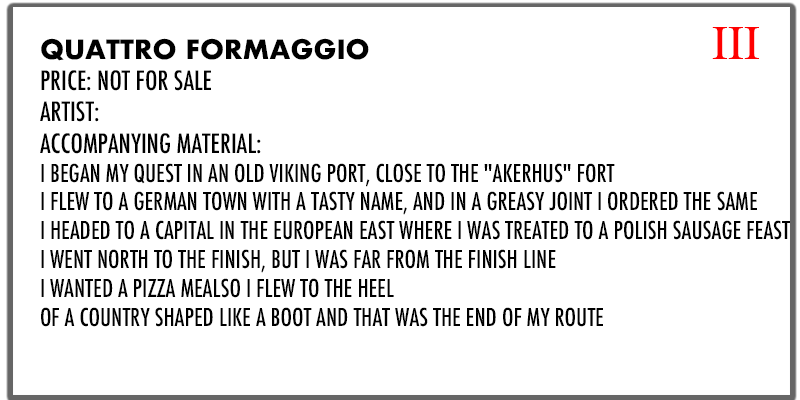
<style>
.page{position:relative;width:800px;height:400px;background:#ffffff}
.page>*{position:absolute;margin:0}
.t1{font:48px "Times-Roman";color:#ff0000}
.t2{font:24px "Futura-CondensedMedium";color:#000000;text-transform:uppercase}
.t3{font:26.1px "Futura-Bold";color:#000000;text-transform:uppercase}
.t4{font:26.1px "Futura-CondensedMedium";color:#000000;text-transform:uppercase}
</style>
<div class="page">
<p class="t1" style="left:712px;top:27px;width:47px;height:32px">III</p>
<p class="t2" style="left:40px;top:38px;width:750px;height:289px"><span class="t3">QUATTRO FORMAGGIO<br></span><span class="t4">Price: Not for sale<br>ARTIST: <br>ACCOMPANYING MATERIAL:<br></span>I BEGAN MY QUEST IN AN OLD VIKING PORT, CLOSE TO THE "AKERHUS" FORT<br>I FLEW TO A GERMAN TOWN WITH A TASTY NAME, AND IN A GREASY JOINT I ORDERED THE SAME<br>I HEADED TO A CAPITAL IN THE EUROPEAN EAST WHERE I WAS TREATED TO A POLISH SAUSAGE FEAST<br>I WENT NORTH TO THE FINISH, BUT I WAS FAR FROM THE FINISH LINE<br>I WANTED A PIZZA MEALSO I FLEW TO THE HEEL<br>OF A COUNTRY SHAPED LIKE A BOOT AND THAT WAS THE END OF MY ROUTE</p>
</div>
